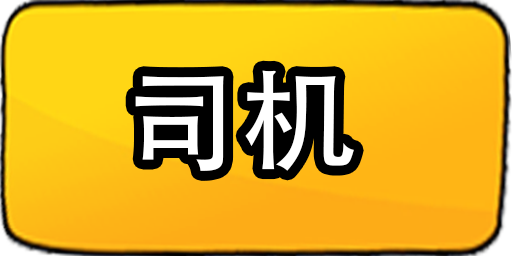
<style>
.page{position:relative;width:512px;height:256px}
.page>*{position:absolute;margin:0}
.t1{font:109.7px "AdobeHeitiStd-Regular";letter-spacing:0.012em;color:#ffffff;scale:1.06 1}
.t2{font:109.7px "MyriadPro-Regular";letter-spacing:0.012em;color:#ffffff;scale:1.06 1}
</style>
<div class="page">
<p class="t1" style="left:135px;top:70px;width:219px;height:101px"><span class="t2"> </span>司机</p>
</div>
